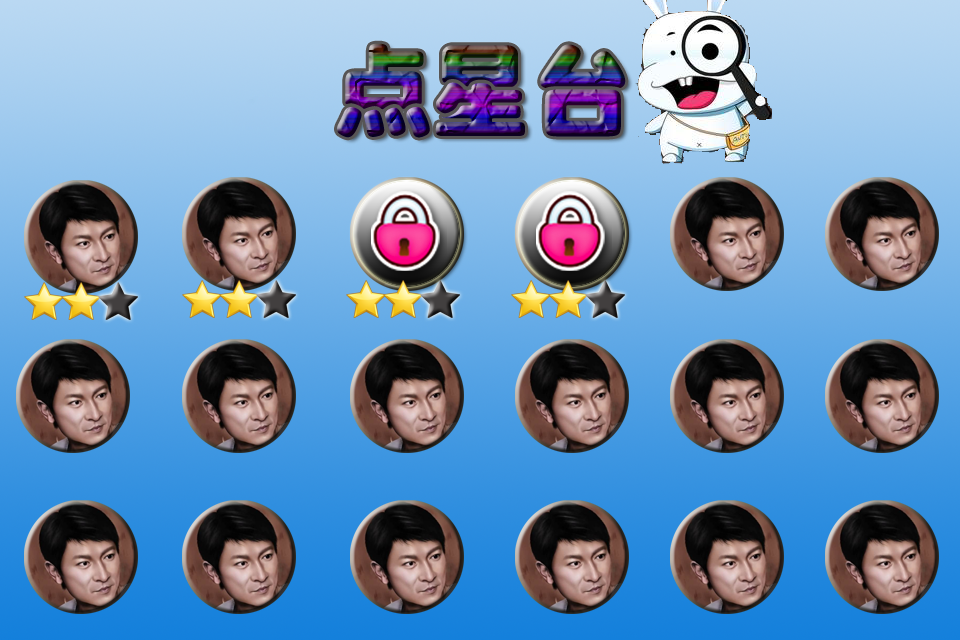
<style>
.page{position:relative;width:960px;height:640px}
.page>*{position:absolute;margin:0}
.t1{font:98.8px "STHupo"}
</style>
<div class="page">
<p class="t1" style="left:337px;top:43px;width:289px;height:95px">点星台</p>
</div>
